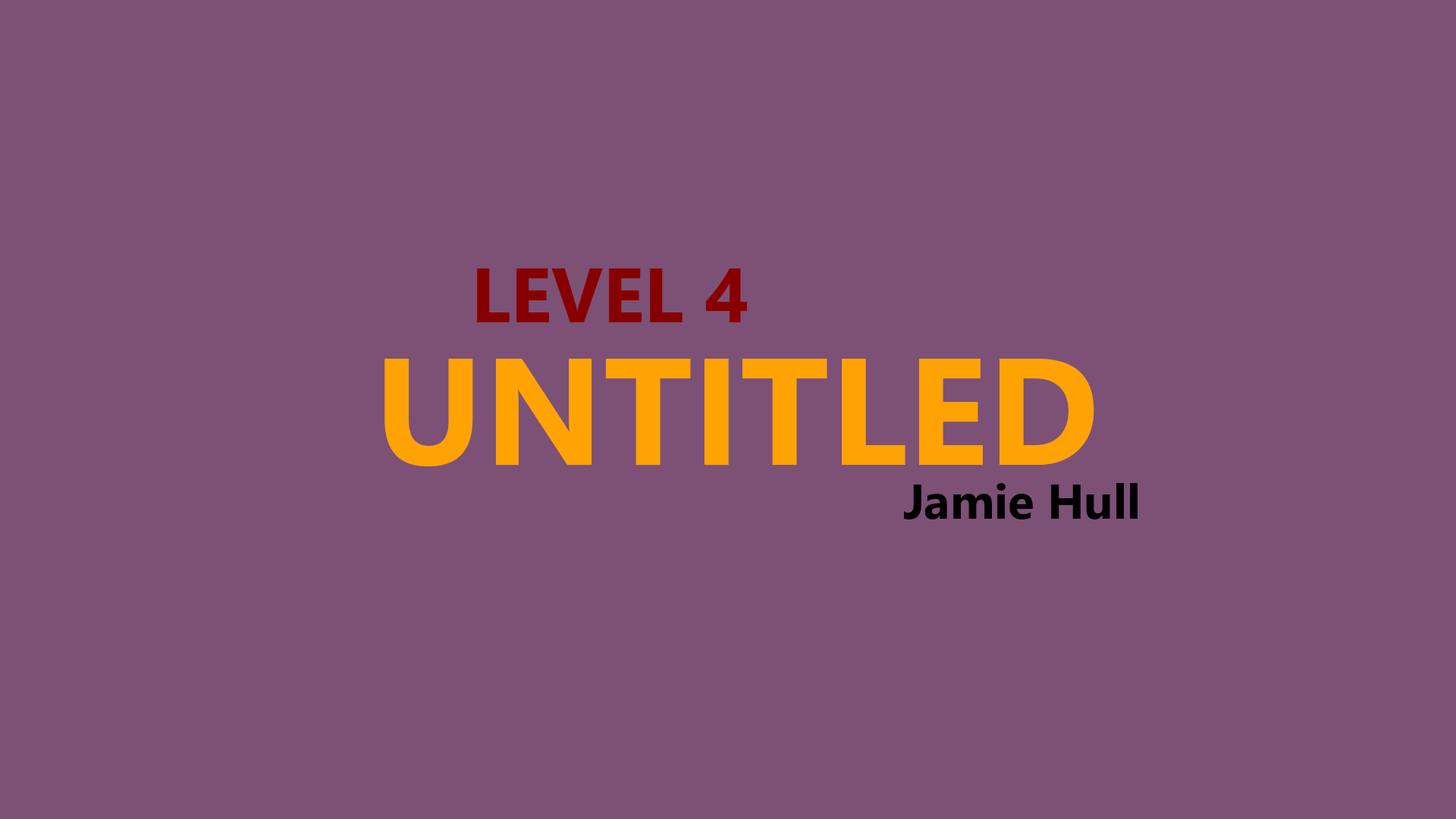
<style>
.page{position:relative;width:1456px;height:819px;background:#7d5076}
.page>*{position:absolute;margin:0}
.t1{font:77px "NirmalaUI-Bold";color:#870000}
.t2{font:151.7px "NirmalaUI-Bold";color:#ffa305}
.t3{font:48.2px "NirmalaUI-Bold";color:#000000}
</style>
<div class="page">
<p class="t1" style="left:477px;top:268px;width:270px;height:54px">LEVEL 4</p>
<p class="t2" style="left:384px;top:359px;width:710px;height:107px">UNTITLED</p>
<p class="t3" style="left:904px;top:483px;width:233px;height:36px">Jamie Hull</p>
</div>
